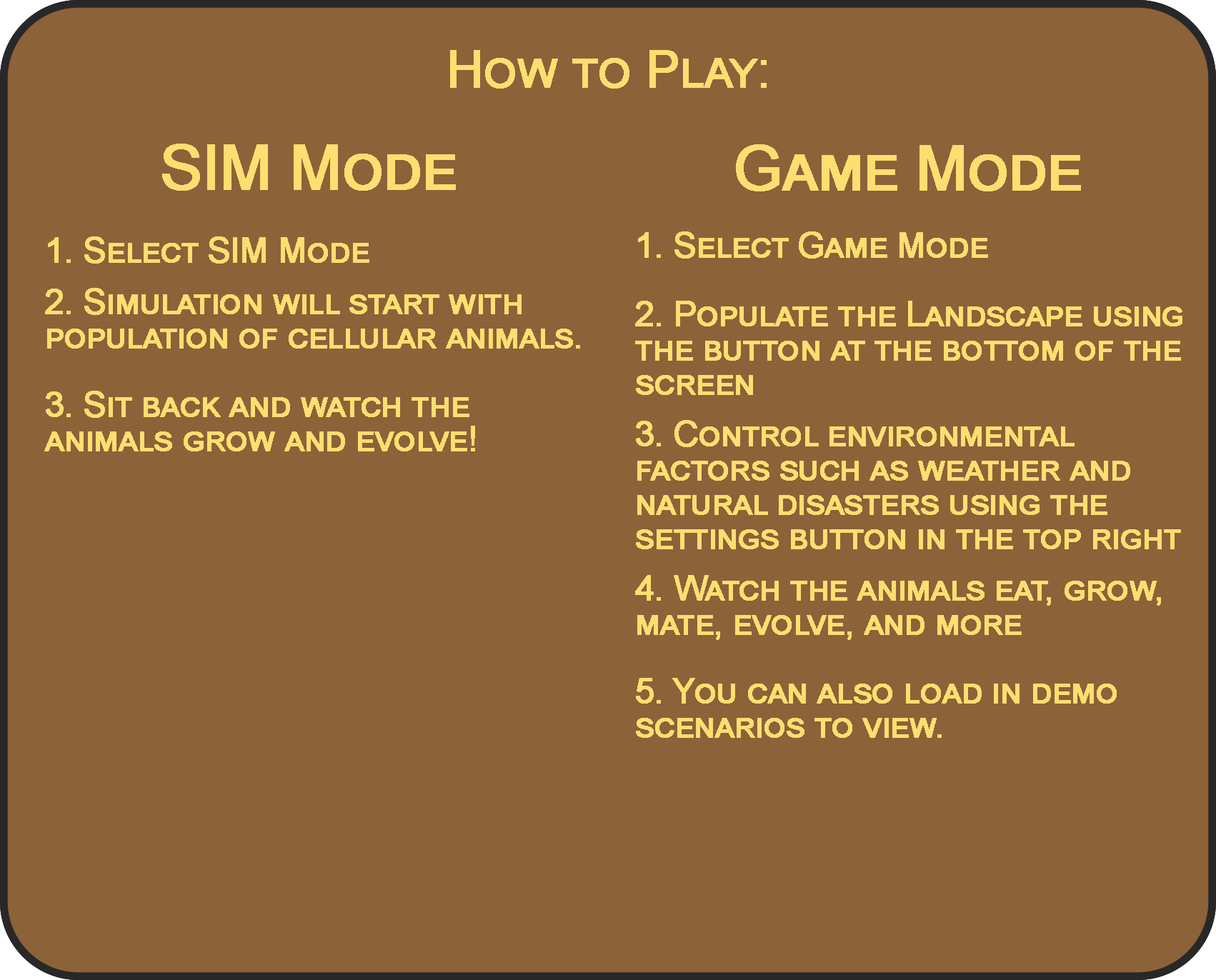
<style>
.page{position:relative;width:1216px;height:980px;background:#8c6239}
.page>*{position:absolute;margin:0}
.t1{font:51.5px "ArialMT";letter-spacing:-0.025em;color:#fede70;font-variant:small-caps;font-weight:bold}
.t2{font:62.8px "ArialMT";letter-spacing:-0.025em;color:#fede70;font-variant:small-caps;font-weight:bold}
.t3{font:34.3px/34.3px "ArialMT";letter-spacing:-0.025em;color:#fede70;font-variant:small-caps;font-weight:bold}
.t4{font:34.3px/12.9px "ArialMT";letter-spacing:-0.025em;color:#fede70;font-variant:small-caps;font-weight:bold}
.t5{font:34.3px/51.5px "ArialMT";letter-spacing:-0.025em;color:#fede70;font-variant:small-caps;font-weight:bold}
</style>
<div class="page">
<p class="t1" style="left:450px;top:50px;width:317px;height:39px">How to Play:</p>
<p class="t2" style="left:162px;top:144px;width:294px;height:47px">SIM Mode</p>
<p class="t2" style="left:736px;top:144px;width:345px;height:48px">Game Mode</p>
<p class="t3" style="left:635px;top:232px;width:548px;height:506px"><span class="t4">1. Select Game M</span>ode<br><br>2. Populate the Landscape using<br>the button at the bottom of the <br>screen<br><span class="t5">3. </span>Control environmental<br>factors such as weather and<br>natural disasters using the <br>settings button in the top right<span class="t5"><br>4. </span>Watch the animals eat, grow,<br>mate, evolve, and more<br><br>5. You can also load in demo<br>scenarios to view.</p>
<p class="t3" style="left:44px;top:237px;width:536px;height:215px"><span class="t4">1. Select SIM Mode</span><span class="t5"><br>2. Simulation will start with<br></span>population of cellular animals.<br><br>3. Sit back and watch the <br>animals grow and evolve!</p>
</div>
